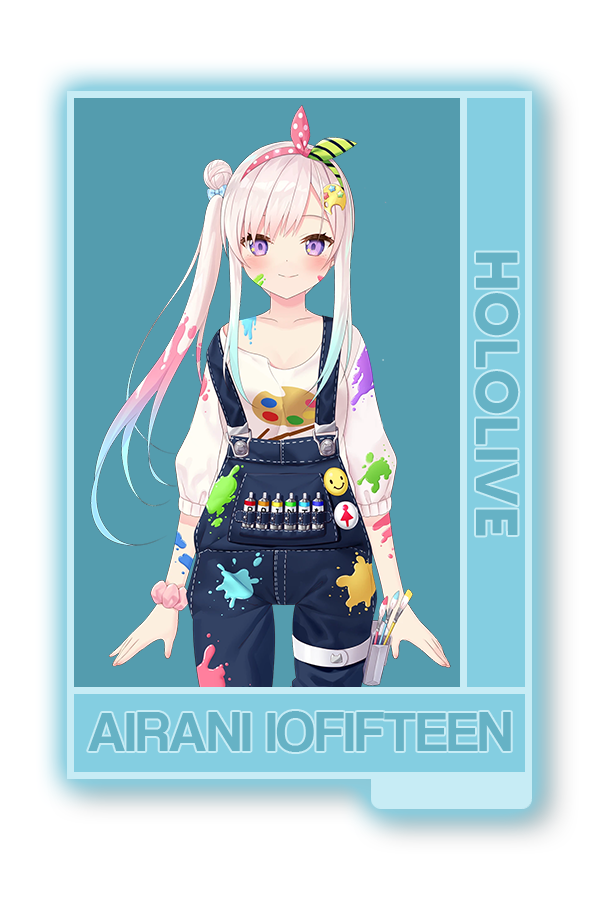
<style>
.page{position:relative;width:600px;height:900px;background:#549cae}
.page>*{position:absolute;margin:0}
.t1{font:59.2px "MADETOMMY-Bold";color:#66b2c5}
.t2{font:57.8px "CoolveticaRg-Regular";color:#66b2c5}
</style>
<div class="page">
<p class="t1" style="left:475px;top:252px;width:44px;height:284px;rotate:90deg">HOLOLIVE</p>
<p class="t2" style="left:88px;top:711px;width:423px;height:41px">AIRANI IOFIFTEEN</p>
</div>
